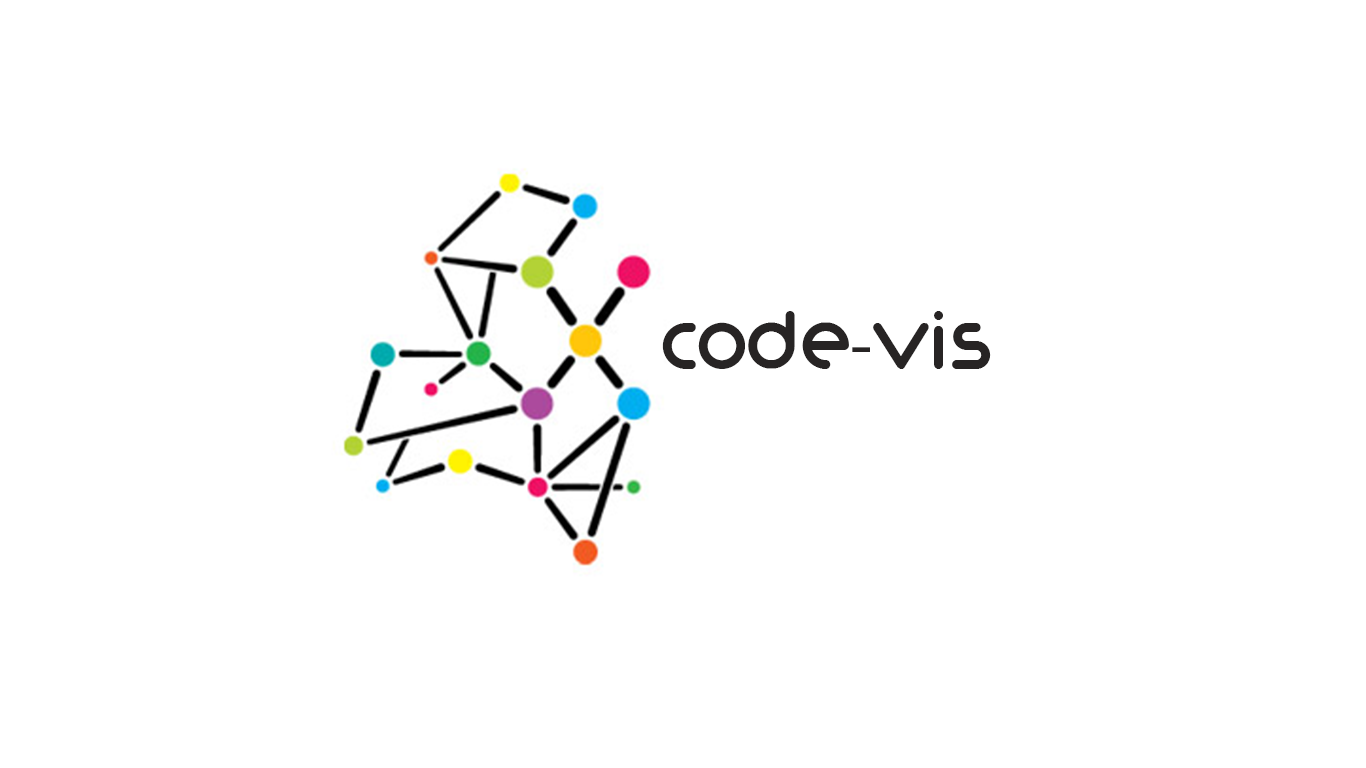
<style>
.page{position:relative;width:1366px;height:768px;background:#ffffff}
.page>*{position:absolute;margin:0}
.t1{font:72px "Organocoloredversionat:logomagazin.comorgano-font";color:#272424}
.t2{font:72px "MyriadPro-Regular";color:#272424}
</style>
<div class="page">
<p class="t1" style="left:662px;top:311px;width:329px;height:58px">Code<span class="t2">-</span>Vis</p>
</div>
